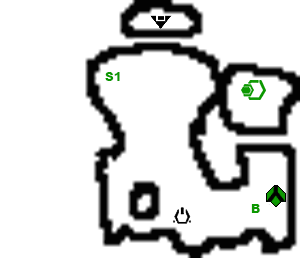
<style>
.page{position:relative;width:300px;height:258px;background:#ffffff}
.page>*{position:absolute;margin:0}
.t1{font:12px "Arial-Black";color:#0c9801}
</style>
<div class="page">
<p class="t1" style="left:105px;top:72px;width:15px;height:9px">S1</p>
<p class="t1" style="left:251px;top:204px;width:9px;height:9px">B</p>
</div>
